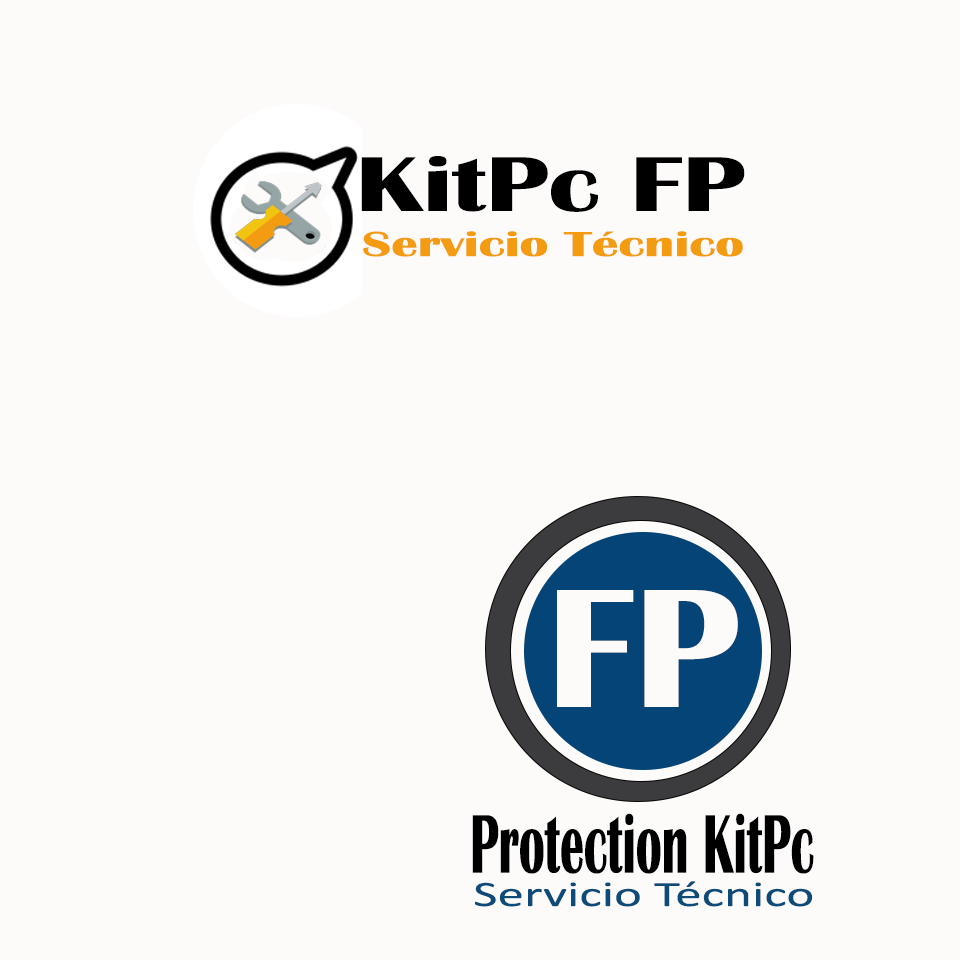
<style>
.page{position:relative;width:960px;height:960px;background:#fdfafa}
.page>*{position:absolute;margin:0}
.t1{font:80.3px "BritannicBold";color:#000000;scale:1.3 1}
.t2{font:36px "BritannicBold";color:#f39c12;scale:1.48 1}
.t3{font:175px "BritannicBold";color:#fdfafa}
.t4{font:85.8px "BritannicBold";color:#000000;scale:0.55 1}
.t5{font:36px "Calibri";color:#0c4c78;scale:1.48 1}
</style>
<div class="page">
<p class="t1" style="left:361px;top:156px;width:384px;height:56px">KitPc FP</p>
<p class="t2" style="left:363px;top:231px;width:380px;height:26px">Servicio Técnico</p>
<p class="t3" style="left:557px;top:590px;width:181px;height:117px">FP</p>
<p class="t4" style="left:472px;top:813px;width:342px;height:61px">Protection KitPc</p>
<p class="t5" style="left:474px;top:881px;width:339px;height:26px">Servicio Técnico</p>
</div>
